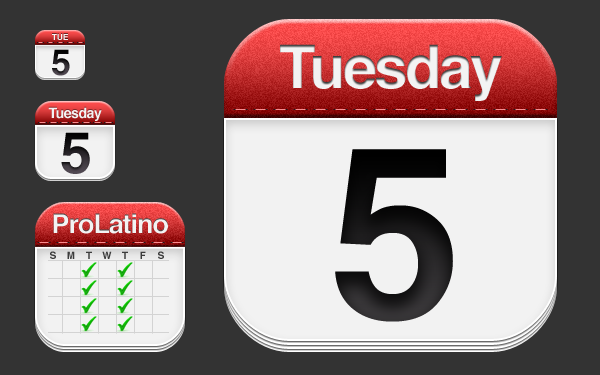
<style>
.page{position:relative;width:600px;height:375px;background:#333333}
.page>*{position:absolute;margin:0}
.t1{font:8.4px "Helvetica-Bold";color:#f3f3f3}
.t2{font:36px "Helvetica-Bold";letter-spacing:-0.04em}
.t3{font:60px "Helvetica-Bold";letter-spacing:-0.04em;color:#f3f3f3}
.t4{font:14px "Helvetica-Bold";letter-spacing:-0.03em;color:#f3f3f3}
.t5{font:57.7px "Helvetica-Bold";letter-spacing:-0.04em}
.t6{font:240px "Helvetica-Bold";letter-spacing:-0.04em;color:#131313}
.t7{font:27px "Helvetica-Bold";letter-spacing:-0.04em;color:#f3f3f3}
.t8{font:10px "Helvetica-Bold";letter-spacing:-0.04em;color:#3c3c3c}
</style>
<div class="page">
<p class="t1" style="left:52px;top:34px;width:16px;height:6px">TUE</p>
<p class="t2" style="left:52px;top:49px;width:18px;height:27px">5</p>
<p class="t3" style="left:280px;top:44px;width:222px;height:57px">Tuesday</p>
<p class="t4" style="left:48px;top:107px;width:54px;height:14px">Tuesday</p>
<p class="t5" style="left:61px;top:132px;width:29px;height:42px">5</p>
<p class="t6" style="left:335px;top:149px;width:118px;height:173px">5</p>
<p class="t7" style="left:53px;top:213px;width:115px;height:21px">ProLatino</p>
<p class="t8" style="left:50px;top:251px;width:6px;height:8px">S</p>
<p class="t8" style="left:67px;top:251px;width:8px;height:8px">M</p>
<p class="t8" style="left:86px;top:251px;width:6px;height:8px">T</p>
<p class="t8" style="left:102px;top:251px;width:10px;height:8px">W</p>
<p class="t8" style="left:122px;top:251px;width:6px;height:8px">T</p>
<p class="t8" style="left:140px;top:251px;width:6px;height:8px">F</p>
<p class="t8" style="left:158px;top:251px;width:6px;height:8px">S</p>
</div>
